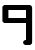
<style>
.page{position:relative;width:35px;height:50px;background:#ffffff}
.page>*{position:absolute;margin:0}
.t1{font:61.9px "OCRAExtended";color:#000000;scale:1.16 1}
</style>
<div class="page">
<p class="t1" style="left:2px;top:5px;width:31px;height:40px">9</p>
</div>
